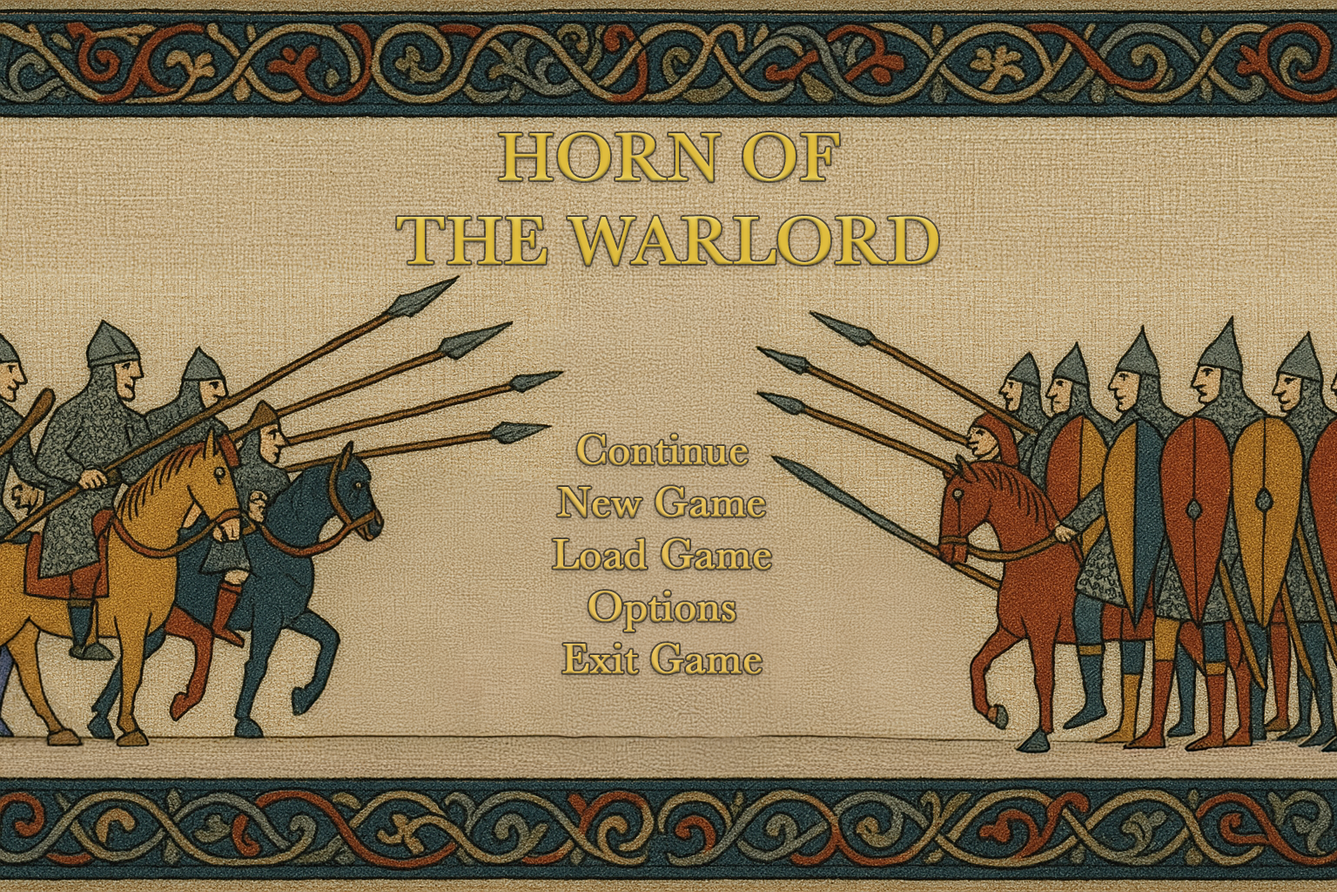
<style>
.page{position:relative;width:1337px;height:892px}
.page>*{position:absolute;margin:0}
.t1{font:69.7px "Baskerville";color:#dfbd3e;font-weight:bold}
.t2{font:43.5px "Baskerville";color:#e9c257;font-weight:bold}
</style>
<div class="page">
<p class="t1" style="left:397px;top:132px;width:542px;height:134px;text-align:center">HORN OF <br>THE WARLORD</p>
<p class="t2" style="left:553px;top:434px;width:218px;height:240px;text-align:center">Continue<br>New Game<br>Load Game<br>Options<br>Exit Game</p>
</div>
